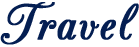
<style>
.page{position:relative;width:139px;height:47px;background:#ffffff}
.page>*{position:absolute;margin:0}
.t1{font:60px "CACChampagne";letter-spacing:0.025em;color:#041e52;font-weight:bold}
</style>
<div class="page">
<p class="t1" style="left:0px;top:2px;width:139px;height:43px">Travel</p>
</div>
